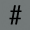
<style>
.page{position:relative;width:30px;height:30px;background:#737979}
.page>*{position:absolute;margin:0}
.t1{font:25px "AgencyFB-Reg";color:#000000}
</style>
<div class="page">
<p class="t1" style="left:9px;top:5px;width:13px;height:20px">#</p>
</div>
